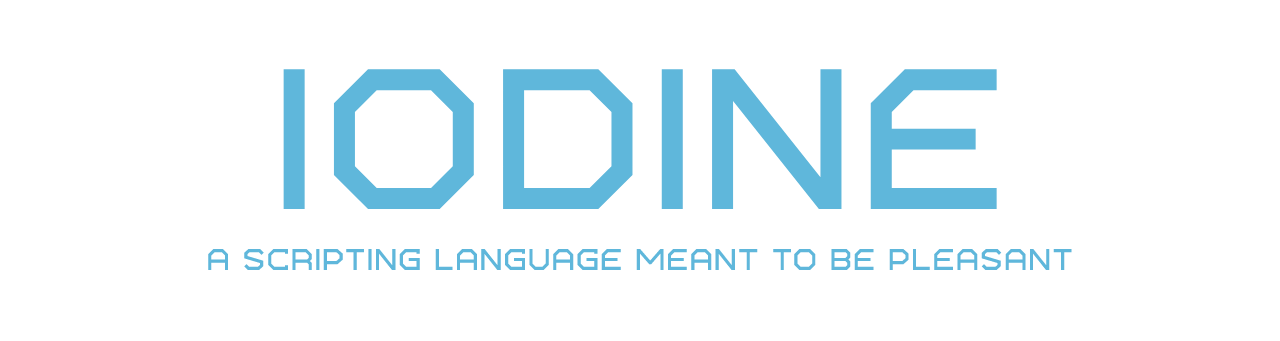
<style>
.page{position:relative;width:1280px;height:341px;background:#ffffff}
.page>*{position:absolute;margin:0}
.t1{font:200px "Bios-Bold";color:#5fb7db}
.t2{font:30px "Bios-Bold";color:#5fb7db}
</style>
<div class="page">
<p class="t1" style="left:283px;top:69px;width:714px;height:140px">IODINE</p>
<p class="t2" style="left:208px;top:249px;width:864px;height:21px">A scripting language meant to be pleasant</p>
</div>
